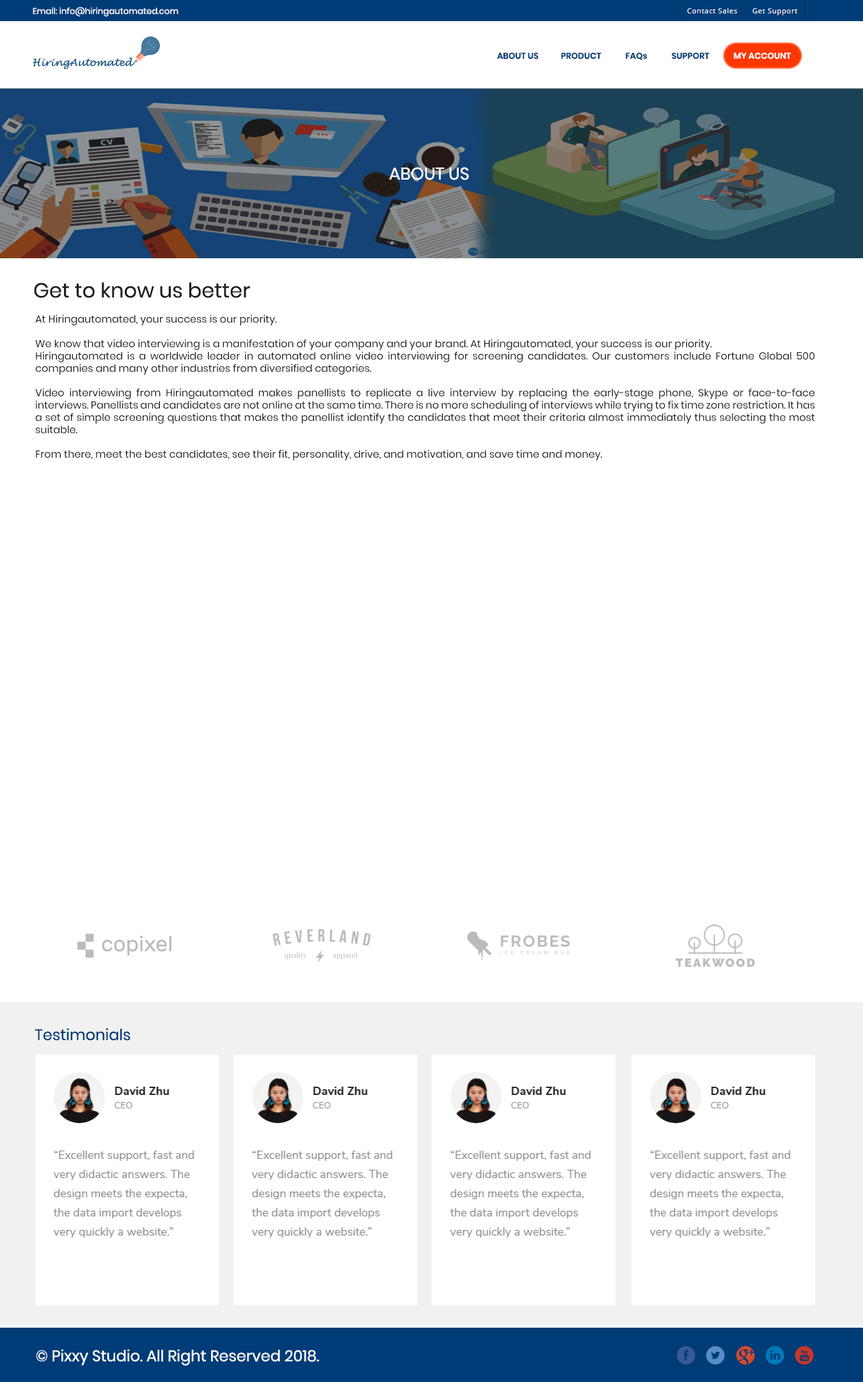
<style>
.page{position:relative;width:863px;height:1382px;background:#ffffff}
.page>*{position:absolute;margin:0}
.t1{font:8.5px "Poppins-Regular";color:#ffffff}
.t2{font:8.5px "Poppins-SemiBold";color:#003c78}
.t3{font:8.5px "Poppins-SemiBold";color:#ffffff}
.t4{font:17.1px "Poppins-Regular";color:#ffffff}
.t5{font:20.5px "Poppins-Regular";color:#1d1d1d}
.t6{font:10.2px "Poppins-Regular";color:#1d1d1d}
.t7{font:15.3px "Poppins-Regular";color:#003c78}
.t8{font:15.3px "Poppins-Regular";color:#ffffff}
</style>
<div class="page">
<p class="t1" style="left:33px;top:7px;width:145px;height:10px">Email: info@hiringautomated.com</p>
<p class="t2" style="left:497px;top:52px;width:294px;height:8px">ABOUT US            PRODUCT             FAQs             SUPPORT             <span class="t3">MY ACCOUNT</span></p>
<p class="t4" style="left:389px;top:167px;width:80px;height:13px">ABOUT US</p>
<p class="t5" style="left:34px;top:282px;width:216px;height:16px">Get to know us better</p>
<p class="t6" style="left:35px;top:315px;width:780px;height:146px;text-align:justify">At Hiringautomated, your success is our priority. <br><br>We know that video interviewing is a manifestation of your company and your brand. At Hiringautomated, your success is our priority. <br>Hiringautomated is a worldwide leader in automated online video interviewing for screening candidates. Our customers include Fortune Global 500 companies and many other industries from diversified categories. <br><br>Video interviewing from Hiringautomated makes panellists to replicate a live interview by replacing the early-stage phone, Skype or face-to-face interviews. Panellists and candidates are not online at the same time. There is no more scheduling of interviews while trying to fix time zone restriction. It has a set of simple screening questions that makes the panellist identify the candidates that meet their criteria almost immediately thus selecting the most suitable.<br><br>From there, meet the best candidates, see their fit, personality, drive, and motivation, and save time and money.</p>
<p class="t7" style="left:35px;top:1028px;width:95px;height:13px">Testimonials</p>
<p class="t8" style="left:36px;top:1350px;width:283px;height:16px">© Pixxy Studio. All Right Reserved 2018.</p>
</div>
